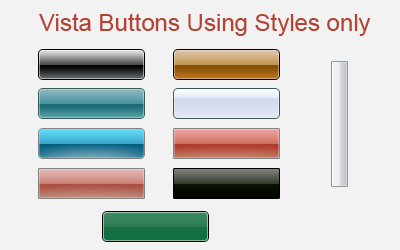
<style>
.page{position:relative;width:400px;height:250px;background:#f2f2f2}
.page>*{position:absolute;margin:0}
.t1{font:24px "ArialMT";color:#b34334}
</style>
<div class="page">
<p class="t1" style="left:39px;top:13px;width:332px;height:23px">Vista Buttons Using Styles only</p>
</div>
